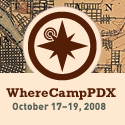
<style>
.page{position:relative;width:125px;height:125px;background:#fee9d0}
.page>*{position:absolute;margin:0}
.t1{font:13px "Rockwell-Bold";color:#551f07}
.t2{font:10px "DIN-Black";color:#566057}
</style>
<div class="page">
<p class="t1" style="left:6px;top:88px;width:110px;height:12px">WhereCampPDX</p>
<p class="t2" style="left:12px;top:102px;width:94px;height:10px">October 17–19, 2008</p>
</div>
